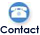
<style>
.page{position:relative;width:40px;height:35px;background:#ffffff}
.page>*{position:absolute;margin:0}
.t1{font:10px "CenturyGothic-Bold";color:#040e2f}
</style>
<div class="page">
<p class="t1" style="left:0px;top:25px;width:39px;height:9px">Contactus</p>
</div>
